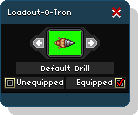
<style>
.page{position:relative;width:138px;height:115px;background:#0c0c0c}
.page>*{position:absolute;margin:0}
.t1{font:9px "04b03";color:#ffffff;scale:0.9 1}
</style>
<div class="page">
<p class="t1" style="left:8px;top:9px;width:63px;height:6px">Loadout-O-Tron</p>
<p class="t1" style="left:41px;top:65px;width:48px;height:6px">Default Drill</p>
<p class="t1" style="left:17px;top:79px;width:46px;height:8px">Unequipped</p>
<p class="t1" style="left:77px;top:79px;width:35px;height:8px">Equipped</p>
</div>
